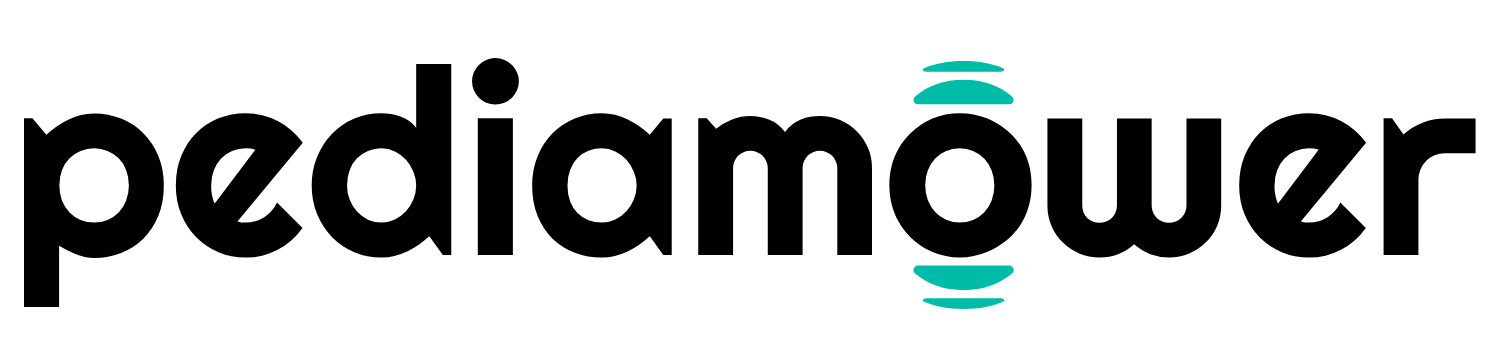
<style>
.page{position:relative;width:1500px;height:363px;background:#ffffff}
.page>*{position:absolute;margin:0}
.t1{font:261.3px "Righteous-Regular";color:#000000}
</style>
<div class="page">
<p class="t1" style="left:24px;top:58px;width:1452px;height:249px">pediamower</p>
</div>
